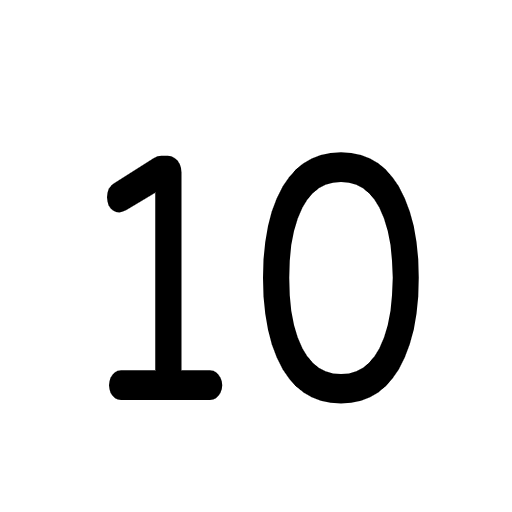
<style>
.page{position:relative;width:512px;height:512px;background:#ffffff}
.page>*{position:absolute;margin:0}
.t1{font:350px "VarelaRound-Regular";color:#000000;scale:0.82 1}
</style>
<div class="page">
<p class="t1" style="left:107px;top:152px;width:312px;height:252px">10</p>
</div>
